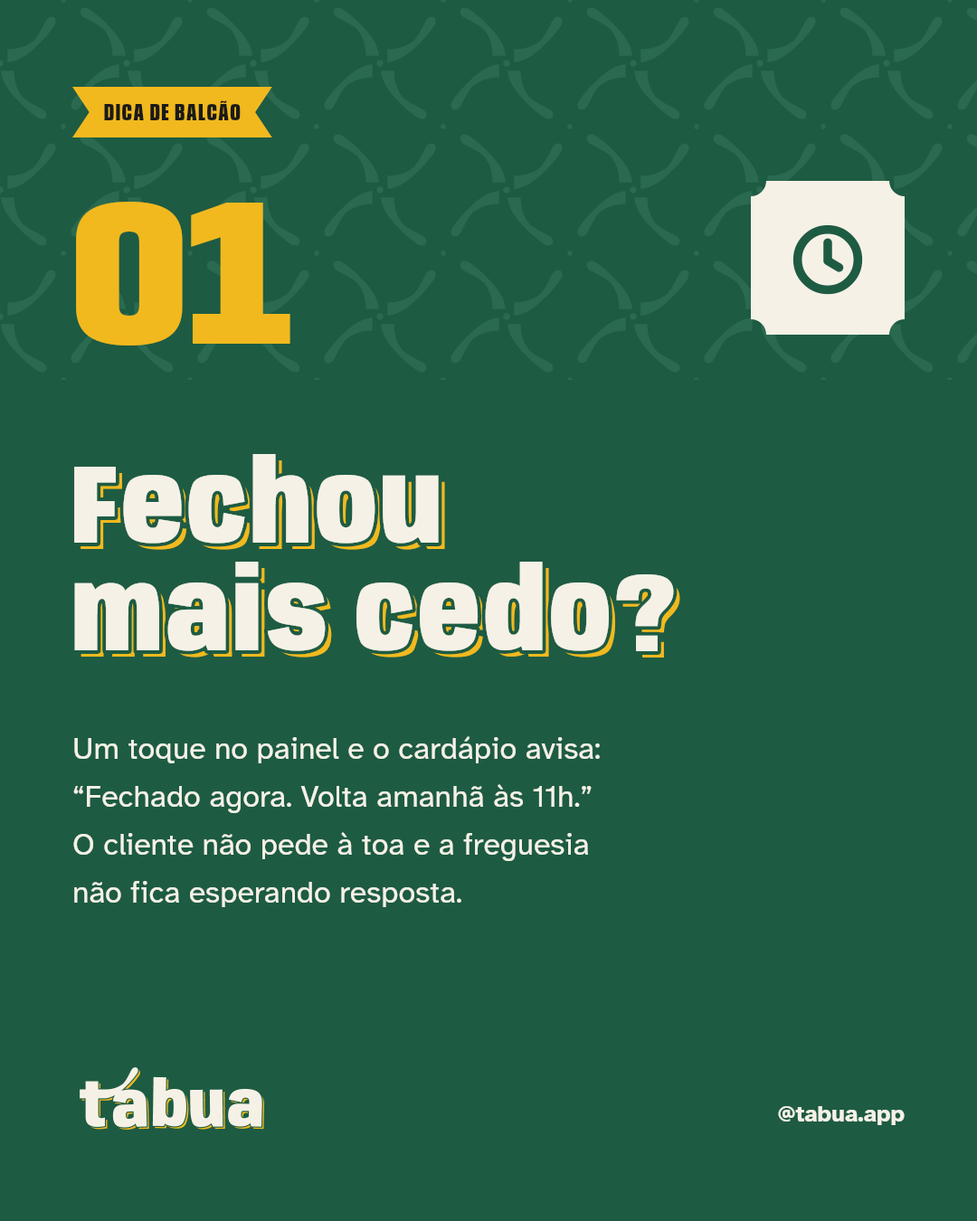
<style>
.page{position:relative;width:977px;height:1221px;background:#1e5b43}
.page>*{position:absolute;margin:0}
.t1{font:24.4px "Anybody-ExtraBold-W60";letter-spacing:0.06em;color:#1a1a17}
.t2{font:208px "Anybody-Black-W80";color:#f2b91e}
.t3{font:112.1px/107.6px "Anybody-Black-W75";letter-spacing:0.034em;color:#f6f1e6}
.t4{font:112.1px/107.6px "Anybody-Black-W75";letter-spacing:0.034em}
.t5{font:30.7px/47.9px "AtkinsonHyperlegible-Regular";color:#f6f1e6}
.t6{font:23.5px "AtkinsonHyperlegible-Bold";color:#f6f1e6}
</style>
<div class="page">
<p class="t1" style="left:104px;top:100px;width:137px;height:20px">DICA DE BALCÃO</p>
<p class="t2" style="left:76px;top:202px;width:214px;height:143px">01</p>
<p class="t3" style="left:71px;top:450px;width:606px;height:205px">Fechou<br>mais cedo?</p>
<p class="t4" style="left:80px;top:460px;width:600px;height:197px">Fechou<br>mais cedo?</p>
<p class="t5" style="left:73px;top:736px;width:527px;height:171px">Um toque no painel e o cardápio avisa:<br>“Fechado agora. Volta amanhã às 11h.”<br>O cliente não pede à toa e a freguesia<br>não fica esperando resposta.</p>
<p class="t6" style="left:778px;top:1106px;width:126px;height:19px">@tabua.app</p>
</div>
